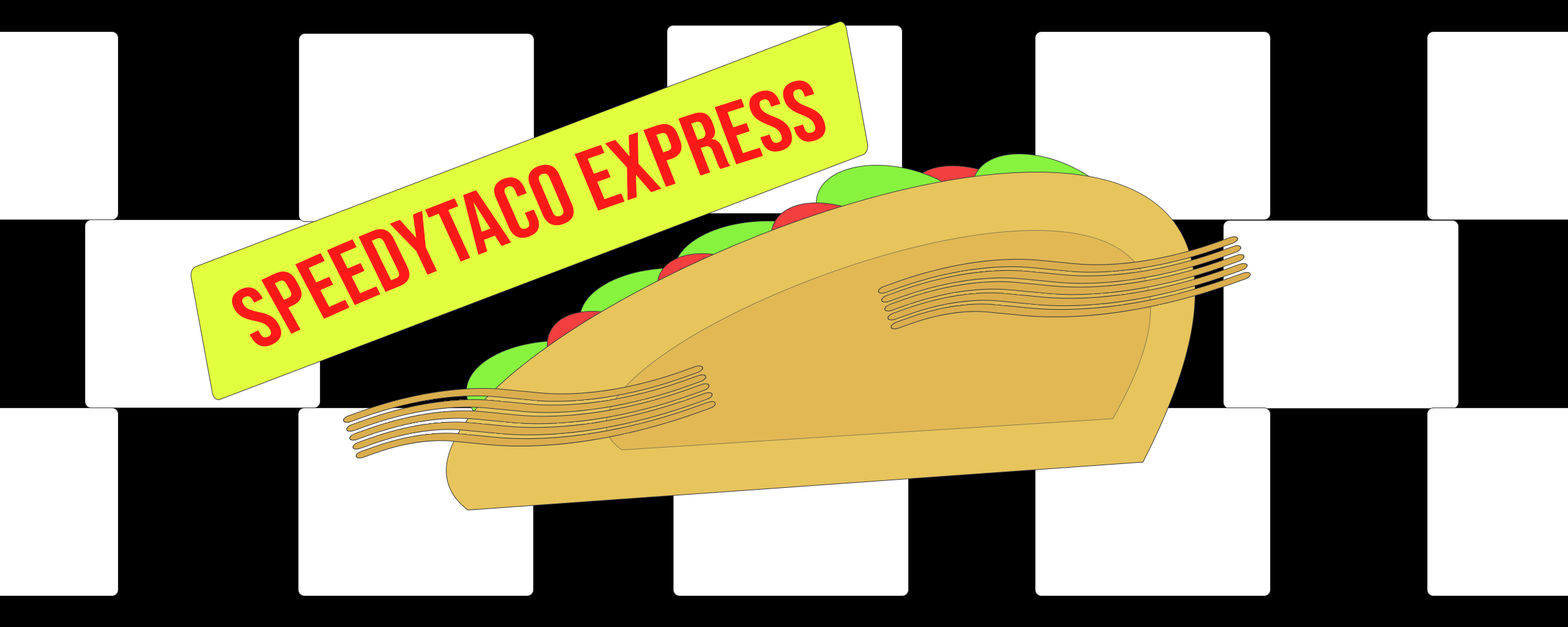
<style>
.page{position:relative;width:1568px;height:627px;background:#ffffff}
.page>*{position:absolute;margin:0}
.t1{font:86.5px "BebasNeue-Regular";color:#fe1919;scale:1.09 1}
</style>
<div class="page">
<p class="t1" style="left:231px;top:80px;width:595px;height:267px;text-align:center">SpeedyTaco express</p>
</div>
